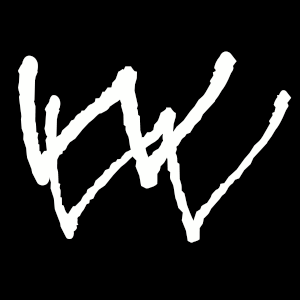
<style>
.page{position:relative;width:300px;height:300px;background:#000000}
.page>*{position:absolute;margin:0}
.t1{font:233.3px "BradleyHandITC";color:#fefffd;font-weight:bold;font-style:italic}
.t2{font:272.2px "BradleyHandITC";color:#fefffd;font-style:italic}
</style>
<div class="page">
<p class="t1" style="left:18px;top:51px;width:219px;height:138px">W</p>
<p class="t2" style="left:44px;top:90px;width:248px;height:153px">W</p>
</div>
